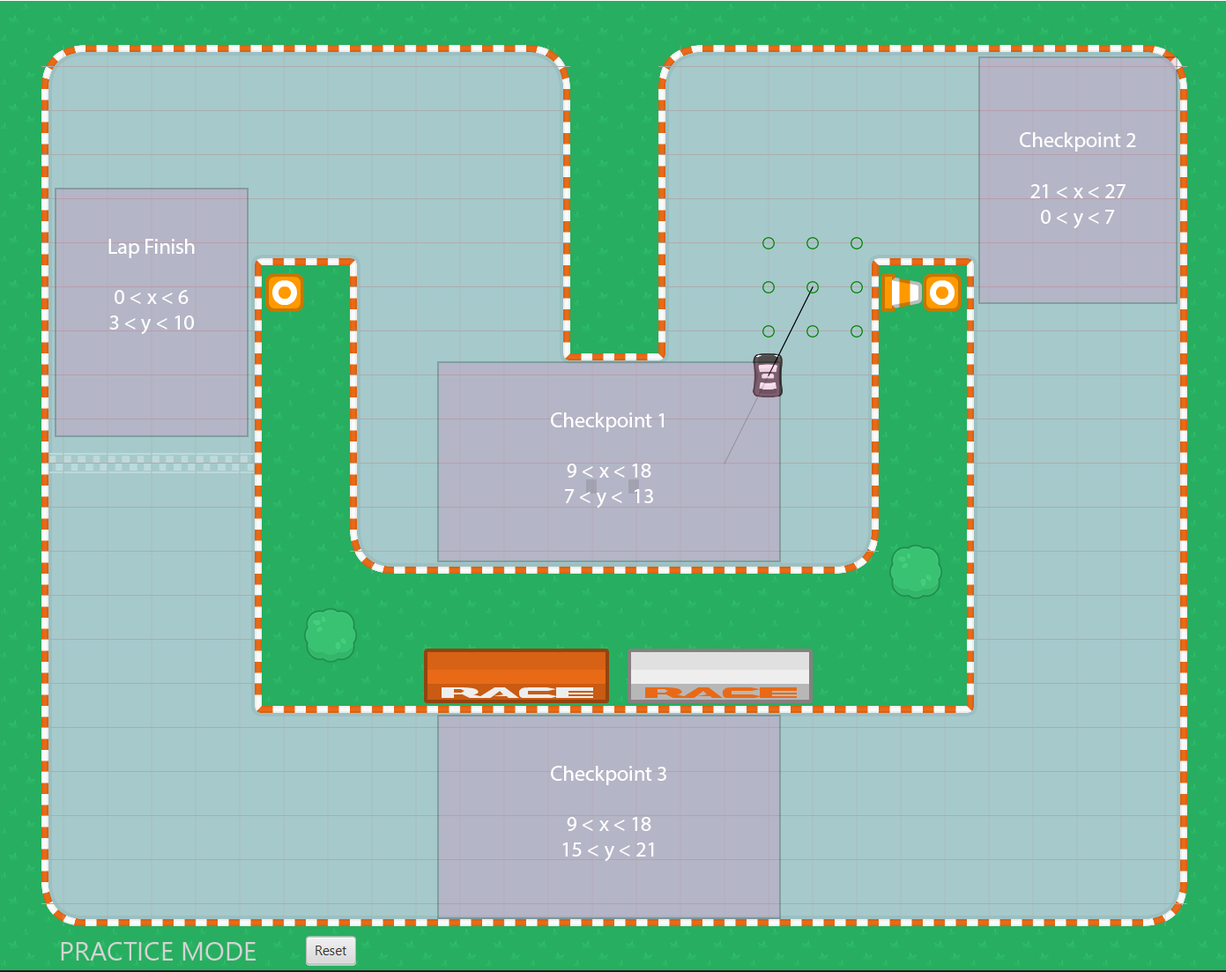
<style>
.page{position:relative;width:1226px;height:972px;background:#a6c9cb}
.page>*{position:absolute;margin:0}
.t1{font:21.2px "MyriadHebrew-Regular";color:#ffffff}
</style>
<div class="page">
<p class="t1" style="left:1020px;top:132px;width:116px;height:97px;text-align:center">Checkpoint 2<br><br>21 &lt; x &lt; 27<br>0 &lt; y &lt; 7</p>
<p class="t1" style="left:108px;top:239px;width:87px;height:96px;text-align:center">Lap Finish<br><br>0 &lt; x &lt; 6<br>3 &lt; y &lt; 10</p>
<p class="t1" style="left:551px;top:413px;width:113px;height:96px;text-align:center">Checkpoint 1<br><br>9 &lt; x &lt; 18<br>7 &lt; y &lt;  13</p>
<p class="t1" style="left:551px;top:766px;width:115px;height:96px;text-align:center">Checkpoint 3<br><br>9 &lt; x &lt; 18<br>15 &lt; y &lt; 21</p>
</div>
